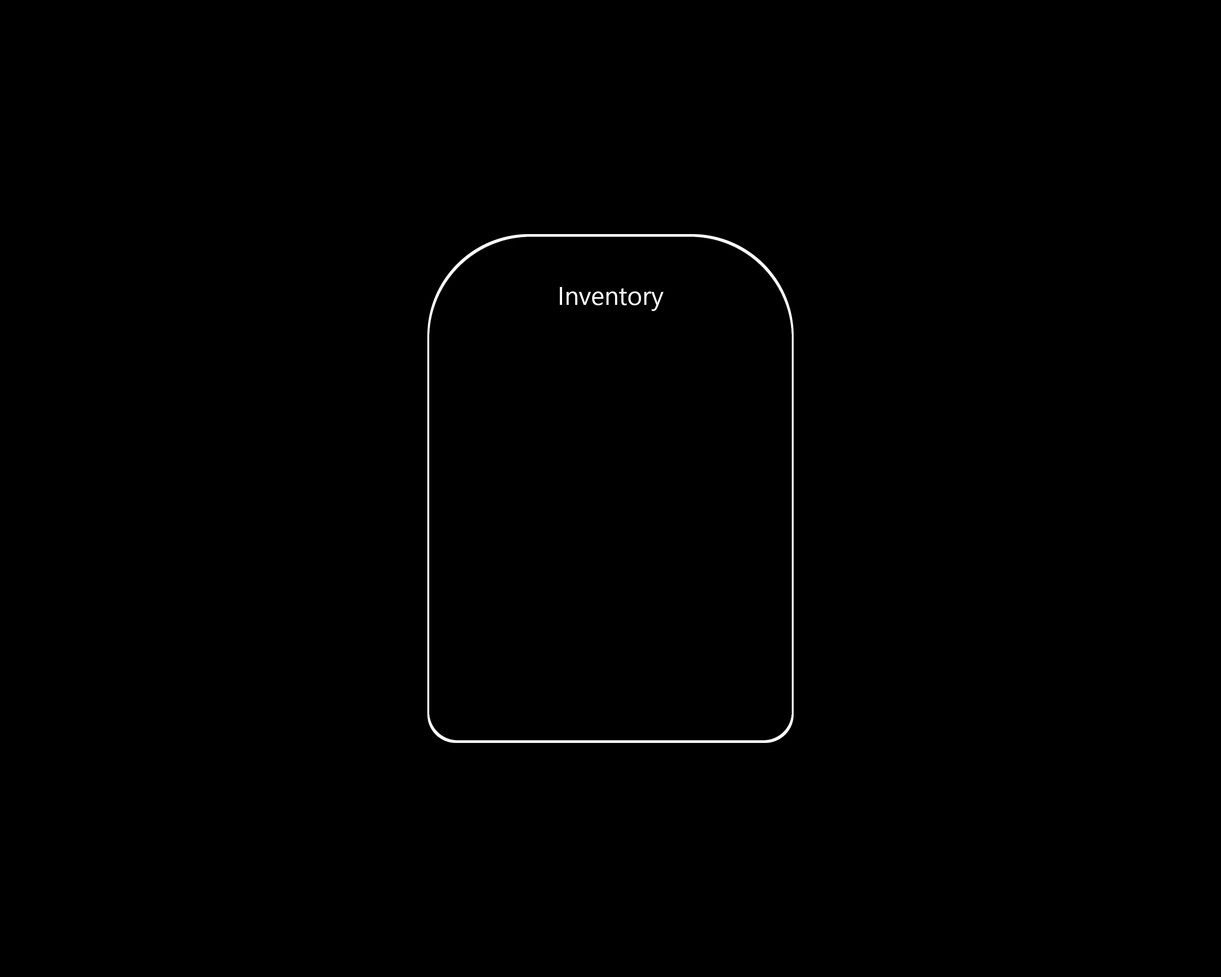
<style>
.page{position:relative;width:1221px;height:977px;background:#000000}
.page>*{position:absolute;margin:0}
.t1{font:25.4px "SegoeUI";color:#ffffff}
</style>
<div class="page">
<p class="t1" style="left:560px;top:287px;width:103px;height:24px">Inventory</p>
</div>
